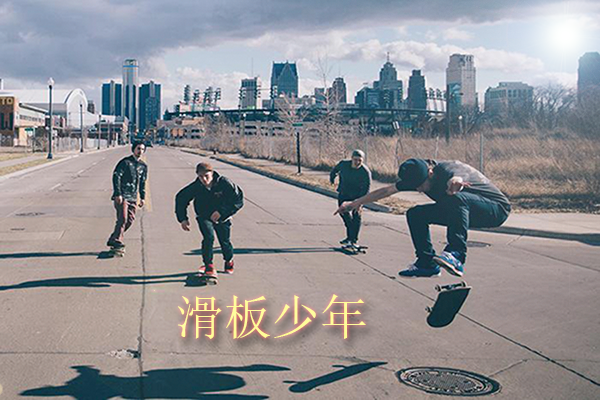
<style>
.page{position:relative;width:600px;height:400px}
.page>*{position:absolute;margin:0}
.t1{font:48px "SimSun";color:#fffc9c}
</style>
<div class="page">
<p class="t1" style="left:177px;top:294px;width:189px;height:45px">滑板少年</p>
</div>
